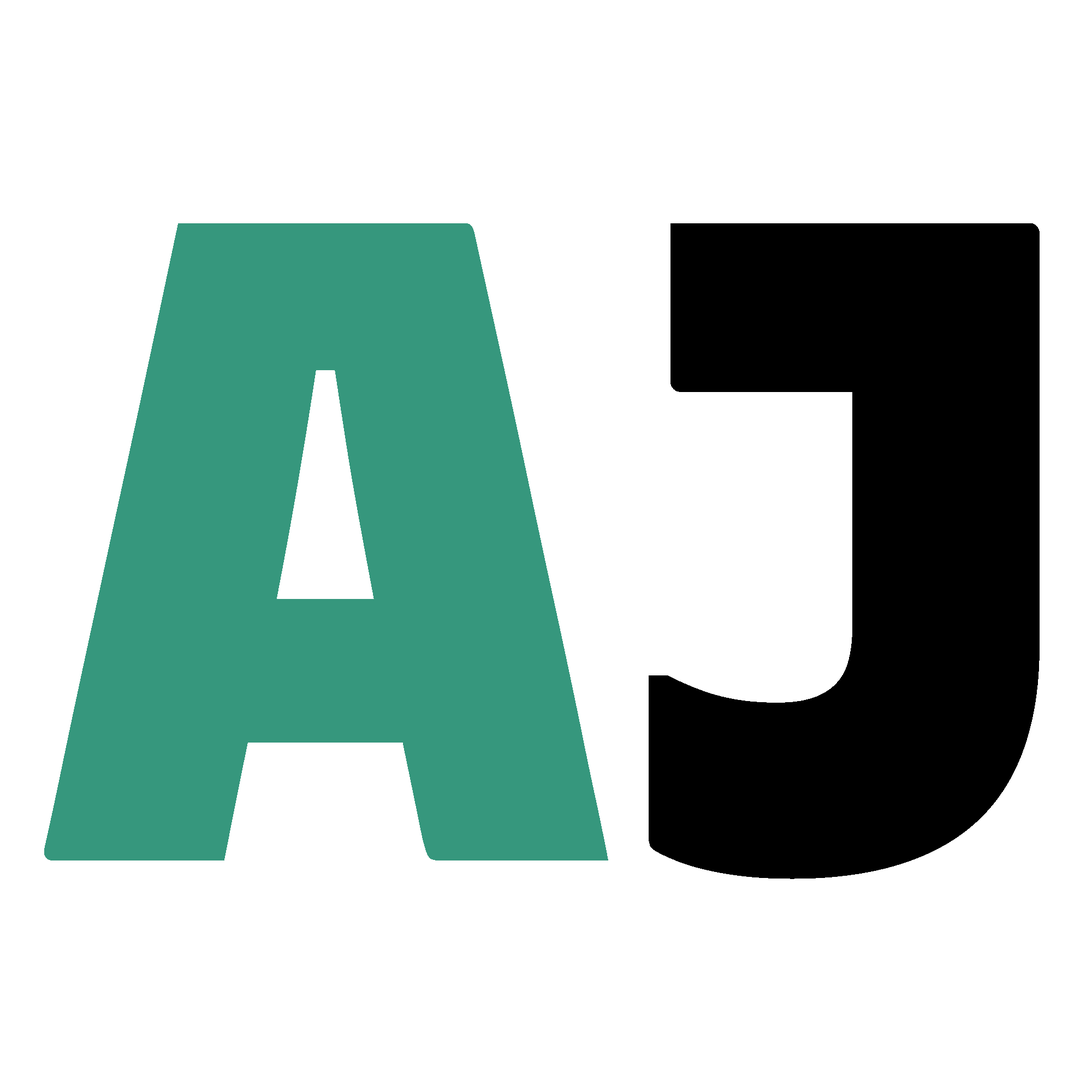
<style>
.page{position:relative;width:1092px;height:1092px;background:#ffffff}
.page>*{position:absolute;margin:0}
.t1{font:910px "Recursive-Black";color:#36977d}
.t2{font:910px "Recursive-Black";color:#000000}
</style>
<div class="page">
<p class="t1" style="left:44px;top:223px;width:996px;height:656px">A<span class="t2">J</span></p>
</div>
